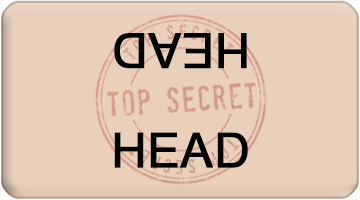
<style>
.page{position:relative;width:360px;height:200px;background:#e8d0bb}
.page>*{position:absolute;margin:0}
.t1{font:48px "ArialMT";color:#000000;font-weight:bold}
</style>
<div class="page">
<p class="t1" style="left:114px;top:33px;width:133px;height:36px;rotate:180deg">HEAD</p>
<p class="t1" style="left:114px;top:132px;width:134px;height:36px">HEAD</p>
</div>
